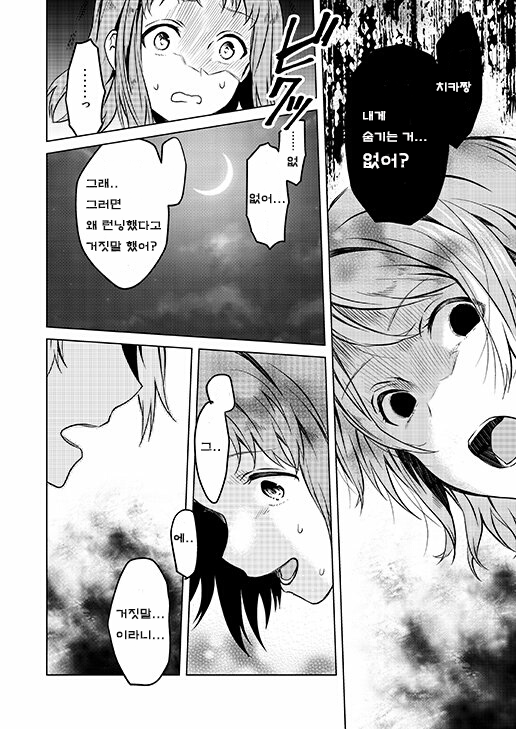
<style>
.page{position:relative;width:516px;height:729px;background:#fefefe}
.page>*{position:absolute;margin:0}
.t1{font:12px "H2mkpB";color:#fffefe}
.t2{font:18px "H2mkpB";color:#fffefe}
.t3{font:12px "H2mkpB";color:#0a0a0a}
</style>
<div class="page">
<p class="t1" style="left:436px;top:81px;width:36px;height:12px">치카짱</p>
<p class="t1" style="left:362px;top:111px;width:65px;height:58px">내게<br>숨기는 거...<br><span class="t2">없어?</span></p>
<p class="t3" style="left:287px;top:156px;width:11px;height:11px">없</p>
<p class="t3" style="left:86px;top:178px;width:75px;height:74px">그래..<br>그러면<br>왜 런닝했다고<br>거짓말 했어?</p>
<p class="t3" style="left:249px;top:193px;width:36px;height:11px">없어...</p>
<p class="t3" style="left:201px;top:442px;width:19px;height:9px">그..</p>
<p class="t3" style="left:173px;top:533px;width:20px;height:10px">에..</p>
<p class="t3" style="left:116px;top:608px;width:48px;height:32px">거짓말...<br>이라니...</p>
</div>
